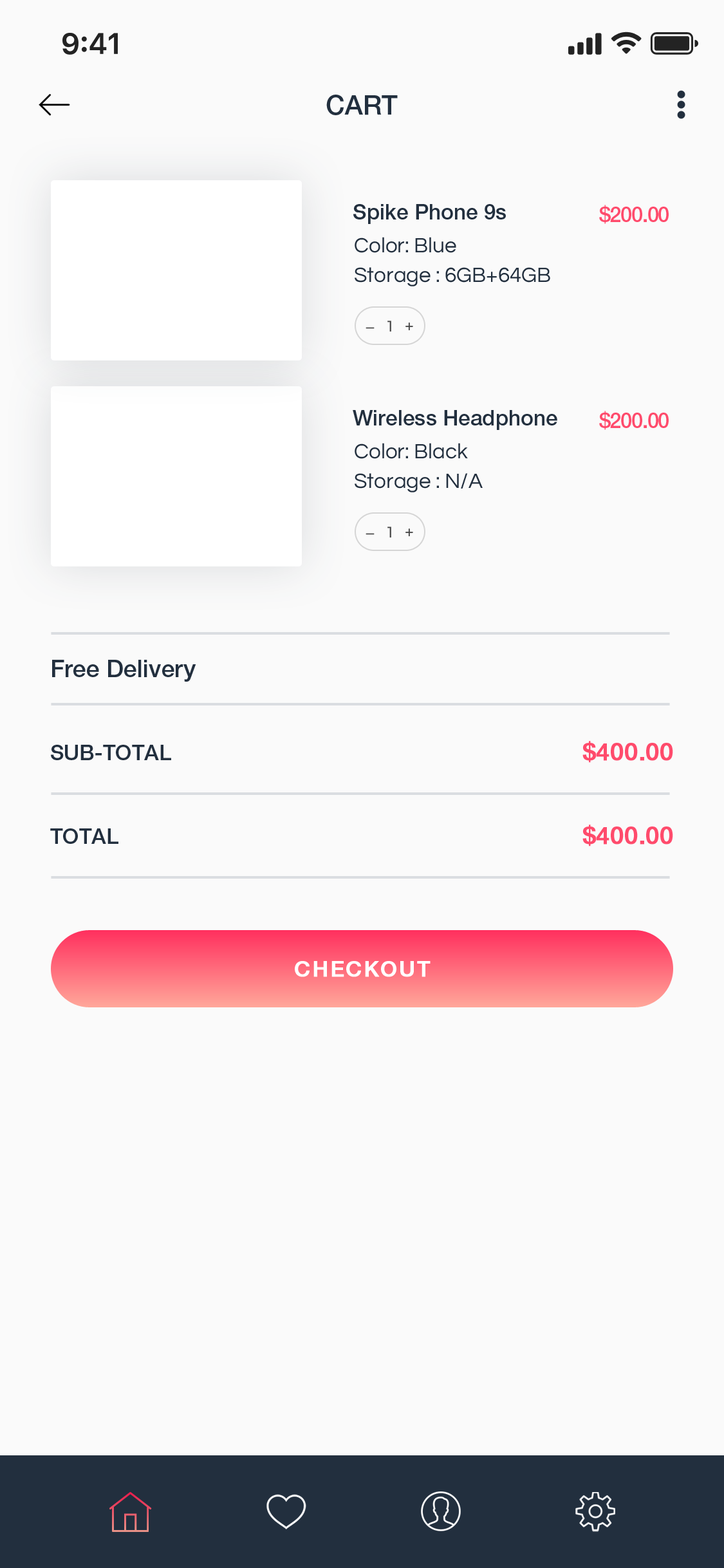
<style>
.page{position:relative;width:724px;height:1568px;background:#fafafa}
.page>*{position:absolute;margin:0}
.t1{font:26.8px "HelveticaNeue-Medium";color:#222f3e}
.t2{font:21.5px "HelveticaNeue-Medium";color:#222f3e}
.t3{font:21.5px "HelveticaNeue-Medium";letter-spacing:-0.05em;color:#ff4b6c}
.t4{font:21.5px/29.5px "Questrial-Regular";color:#222f3e}
.t5{font:16.1px "Questrial-Regular";color:#444444}
.t6{font:24.1px "HelveticaNeue-Medium";color:#222f3e}
.t7{font:24.1px "HelveticaNeue-Medium";color:#ff4b6c;font-weight:bold}
.t8{font:21.5px "HelveticaNeue-Medium";letter-spacing:0.08em;color:#ffffff;font-weight:bold}
</style>
<div class="page">
<p class="t1" style="left:326px;top:95px;width:72px;height:20px">CART</p>
<p class="t2" style="left:353px;top:204px;width:153px;height:20px">Spike Phone 9s</p>
<p class="t3" style="left:599px;top:205px;width:70px;height:19px">$200.00</p>
<p class="t4" style="left:355px;top:237px;width:195px;height:49px">Color: Blue<br>Storage : 6GB+64GB</p>
<p class="t5" style="left:366px;top:327px;width:9px;height:2px">_</p>
<p class="t5" style="left:387px;top:321px;width:4px;height:11px">1</p>
<p class="t5" style="left:406px;top:322px;width:7px;height:9px">+</p>
<p class="t2" style="left:353px;top:410px;width:204px;height:20px">Wireless Headphone</p>
<p class="t3" style="left:599px;top:411px;width:70px;height:19px">$200.00</p>
<p class="t4" style="left:355px;top:443px;width:128px;height:49px">Color: Black<br>Storage : N/A</p>
<p class="t5" style="left:366px;top:533px;width:9px;height:2px">_</p>
<p class="t5" style="left:387px;top:527px;width:4px;height:11px">1</p>
<p class="t5" style="left:406px;top:528px;width:7px;height:9px">+</p>
<p class="t6" style="left:52px;top:660px;width:144px;height:22px">Free Delivery</p>
<p class="t2" style="left:51px;top:745px;width:120px;height:15px">SUB-TOTAL</p>
<p class="t7" style="left:583px;top:741px;width:90px;height:22px">$400.00</p>
<p class="t2" style="left:50px;top:828px;width:68px;height:16px">TOTAL</p>
<p class="t7" style="left:583px;top:825px;width:90px;height:21px">$400.00</p>
<p class="t8" style="left:295px;top:961px;width:136px;height:16px">CHECKOUT</p>
</div>
